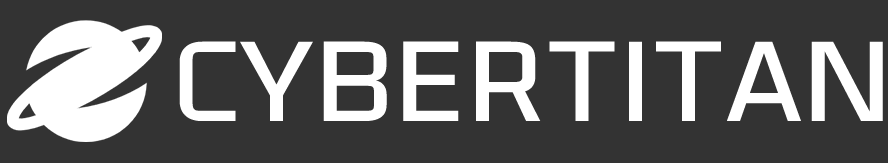
<style>
.page{position:relative;width:888px;height:163px;background:#333333}
.page>*{position:absolute;margin:0}
.t1{font:119.9px "Olney-Light";color:#ffffff}
</style>
<div class="page">
<p class="t1" style="left:179px;top:41px;width:704px;height:80px">CYBERTITAN</p>
</div>
